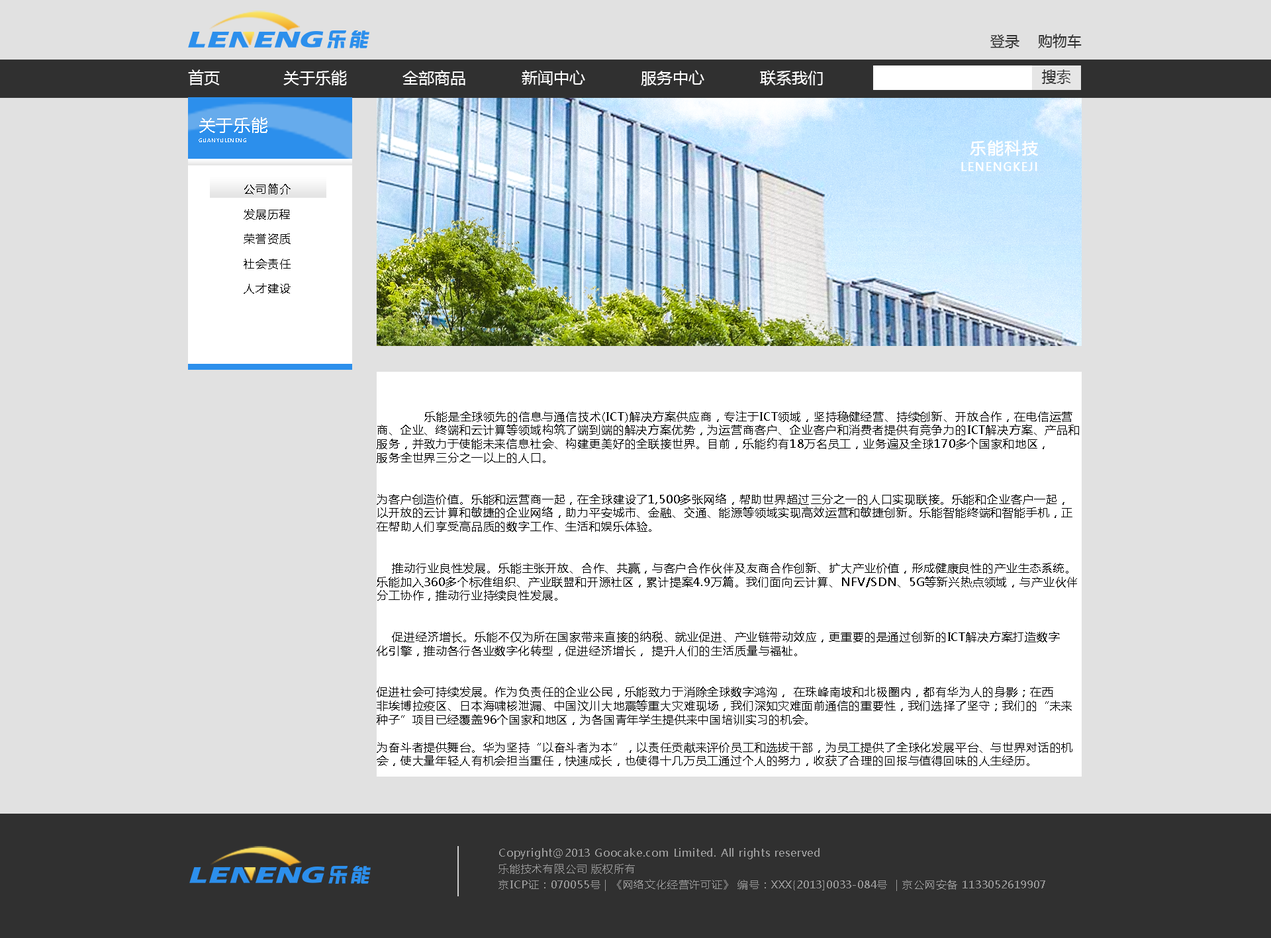
<style>
.page{position:relative;width:1271px;height:938px;background:#e1e1e1}
.page>*{position:absolute;margin:0}
.t1{font:14.6px "MicrosoftYaHei";color:#303030}
.t2{font:15.9px "MicrosoftYaHei";color:#ffffff}
.t3{font:14.6px "MicrosoftYaHei";color:#333333}
.t4{font:5.5px/11px "MicrosoftYaHei";letter-spacing:0.05em;color:#ffffff}
.t5{font:16.5px/11px "MicrosoftYaHei";letter-spacing:0.05em;color:#ffffff}
.t6{font:11px/24.8px "MicrosoftYaHei";letter-spacing:0.05em;color:#000000}
.t7{font:11px/13.8px "MicrosoftYaHei";letter-spacing:0.05em;color:#000000}
.t8{font:10.6px/7.9px "MicrosoftYaHei";letter-spacing:0.05em;color:#999999}
</style>
<div class="page">
<p class="t1" style="left:990px;top:34px;width:91px;height:14px">登录 购物车</p>
<p class="t2" style="left:188px;top:69px;width:635px;height:17px">首页   关于乐能   全部商品   新闻中心   服务中心   联系我们</p>
<p class="t3" style="left:1042px;top:69px;width:29px;height:15px">搜索</p>
<p class="t4" style="left:199px;top:117px;width:68px;height:25px"><span class="t5">关于乐能<br></span>GUANYULENENG</p>
<p class="t6" style="left:244px;top:183px;width:47px;height:111px">公司简介<br>发展历程<br>荣誉资质<br>社会责任<br>人才建设</p>
<p class="t7" style="left:377px;top:411px;width:702px;height:356px">乐能是全球领先的信息与通信技术(ICT)解决方案供应商，专注于ICT领域，坚持稳健经营、持续创新、开放合作，在电信运营<br>商、企业、终端和云计算等领域构筑了端到端的解决方案优势，为运营商客户、企业客户和消费者提供有竞争力的ICT解决方案、产品和<br>服务，并致力于使能未来信息社会、构建更美好的全联接世界。目前，乐能约有18万名员工，业务遍及全球170多个国家和地区，<br>服务全世界三分之一以上的人口。<br><br><br>为客户创造价值。乐能和运营商一起，在全球建设了1,500多张网络，帮助世界超过三分之一的人口实现联接。乐能和企业客户一起，<br>以开放的云计算和敏捷的企业网络，助力平安城市、金融、交通、能源等领域实现高效运营和敏捷创新。乐能智能终端和智能手机，正<br>在帮助人们享受高品质的数字工作、生活和娱乐体验。<br><br><br>    推动行业良性发展。乐能主张开放、合作、共赢，与客户合作伙伴及友商合作创新、扩大产业价值，形成健康良性的产业生态系统。<br>乐能加入360多个标准组织、产业联盟和开源社区，累计提案4.9万篇。我们面向云计算、NFV/SDN、5G等新兴热点领域，与产业伙伴<br>分工协作，推动行业持续良性发展。<br><br><br>    促进经济增长。乐能不仅为所在国家带来直接的纳税、就业促进、产业链带动效应，更重要的是通过创新的ICT解决方案打造数字<br>化引擎，推动各行各业数字化转型，促进经济增长， 提升人们的生活质量与福祉。<br><br>    <br>促进社会可持续发展。作为负责任的企业公民，乐能致力于消除全球数字鸿沟， 在珠峰南坡和北极圈内，都有华为人的身影；在西<br>非埃博拉疫区、日本海啸核泄漏、中国汶川大地震等重大灾难现场，我们深知灾难面前通信的重要性，我们选择了坚守；我们的“未来<br>种子”项目已经覆盖96个国家和地区，为各国青年学生提供来中国培训实习的机会。<br><br>为奋斗者提供舞台。华为坚持“以奋斗者为本”，以责任贡献来评价员工和选拔干部，为员工提供了全球化发展平台、与世界对话的机<br>会，使大量年轻人有机会担当重任，快速成长，也使得十几万员工通过个人的努力，收获了合理的回报与值得回味的人生经历。</p>
<p class="t8" style="left:498px;top:848px;width:547px;height:43px">Copyright@2013 Goocake.com Limited. All rights reserved<br><br>乐能技术有限公司 版权所有<br><br>京ICP证：070055号 | 《网络文化经营许可证》 编号：XXX{2013]0033-084号  | 京公网安备 1133052619907</p>
</div>
